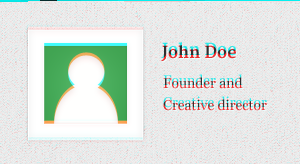
<style>
.page{position:relative;width:300px;height:164px}
.page>*{position:absolute;margin:0}
.t1{font:16px "Merriweather-Bold"}
.t2{font:14px/22px "Georgia"}
</style>
<div class="page">
<p class="t1" style="left:161px;top:41px;width:75px;height:16px">John Doe</p>
<p class="t2" style="left:163px;top:73px;width:104px;height:34px">Founder and<br>Creative director</p>
</div>
